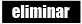
<style>
.page{position:relative;width:82px;height:24px;background:#000000}
.page>*{position:absolute;margin:0}
.t1{font:16.7px "Impact";color:#ffffff}
</style>
<div class="page">
<p class="t1" style="left:12px;top:5px;width:58px;height:13px">eliminar</p>
</div>
